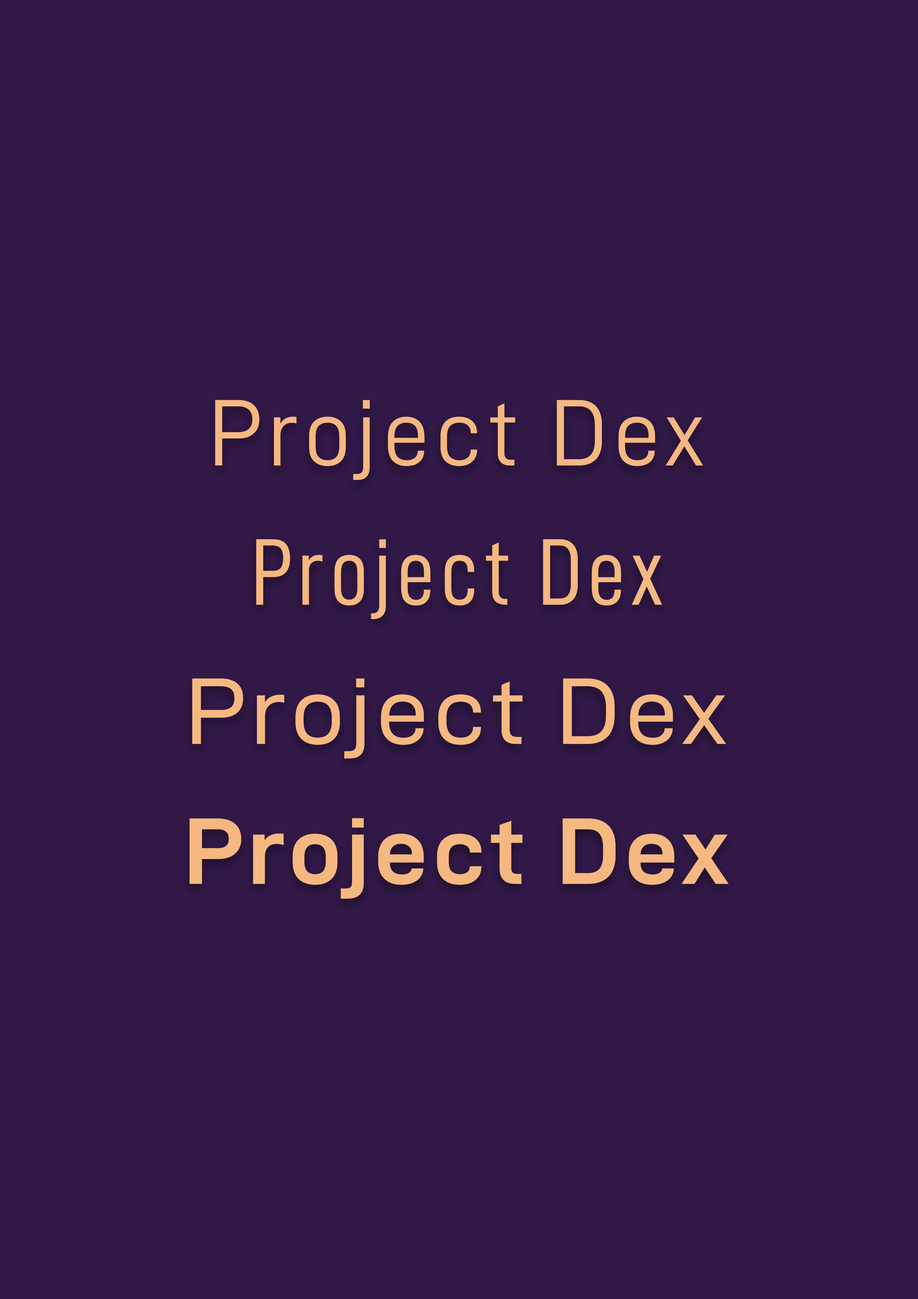
<style>
.page{position:relative;width:918px;height:1299px;background:#311847}
.page>*{position:absolute;margin:0}
.t1{font:94.8px "D-DIN";letter-spacing:0.05em;color:#f5b880}
.t2{font:94.8px "D-DINCondensed";letter-spacing:0.05em;color:#f5b880}
.t3{font:94.8px "D-DINExp";letter-spacing:0.05em;color:#f5b880}
.t4{font:94.8px "D-DINExp-Bold";letter-spacing:0.05em;color:#f5b880}
</style>
<div class="page">
<p class="t1" style="left:215px;top:400px;width:488px;height:80px">Project Dex</p>
<p class="t2" style="left:256px;top:539px;width:406px;height:80px">Project Dex</p>
<p class="t3" style="left:192px;top:678px;width:534px;height:81px">Project Dex</p>
<p class="t4" style="left:190px;top:818px;width:539px;height:81px">Project Dex</p>
</div>
